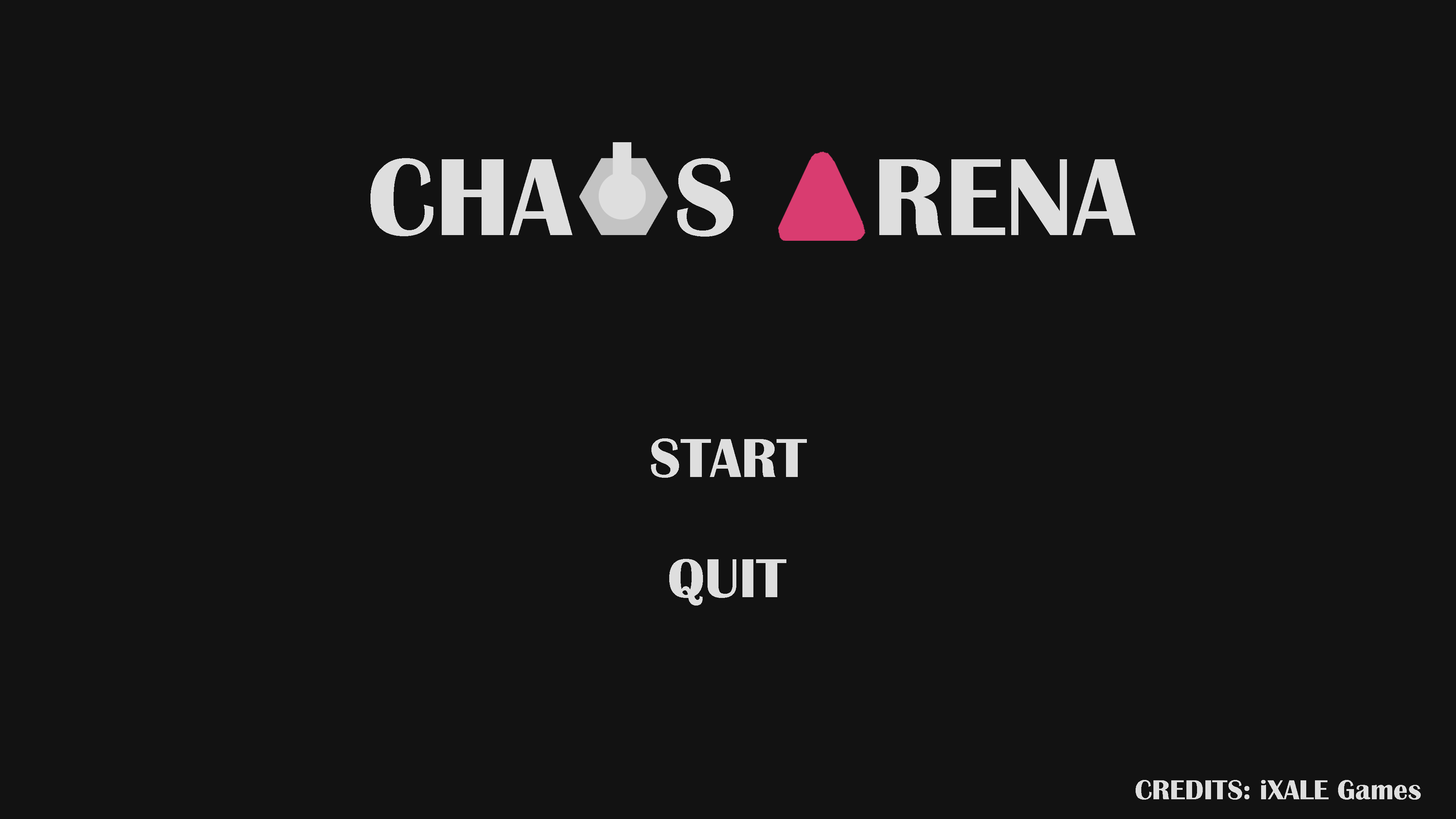
<style>
.page{position:relative;width:1456px;height:819px;background:#121212}
.page>*{position:absolute;margin:0}
.t1{font:113.7px "BritannicBold";color:#dedede}
.t2{font:56.9px "BritannicBold";color:#dedede}
.t3{font:28.4px "BritannicBold";color:#dedede}
</style>
<div class="page">
<p class="t1" style="left:370px;top:158px;width:766px;height:79px">CHA   S    RENA</p>
<p class="t2" style="left:651px;top:438px;width:156px;height:40px">START</p>
<p class="t2" style="left:669px;top:559px;width:117px;height:47px">QUIT</p>
<p class="t3" style="left:1136px;top:780px;width:285px;height:20px">CREDITS: iXALE Games</p>
</div>
